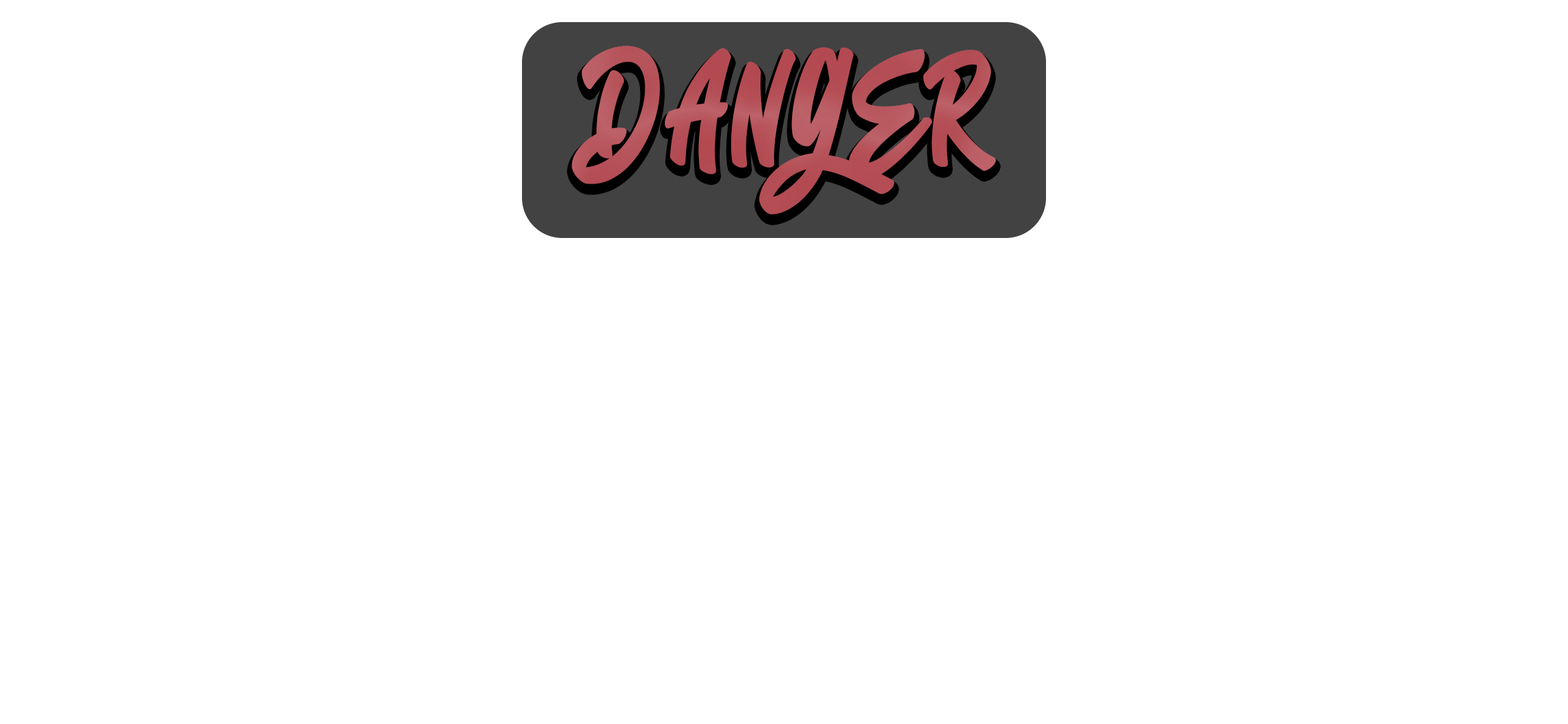
<style>
.page{position:relative;width:1568px;height:724px;background:#ffffff}
.page>*{position:absolute;margin:0}
.t1{font:167.5px "EightiesFREE";color:#b1464e}
</style>
<div class="page">
<p class="t1" style="left:572px;top:46px;width:424px;height:168px">DANGER</p>
</div>
